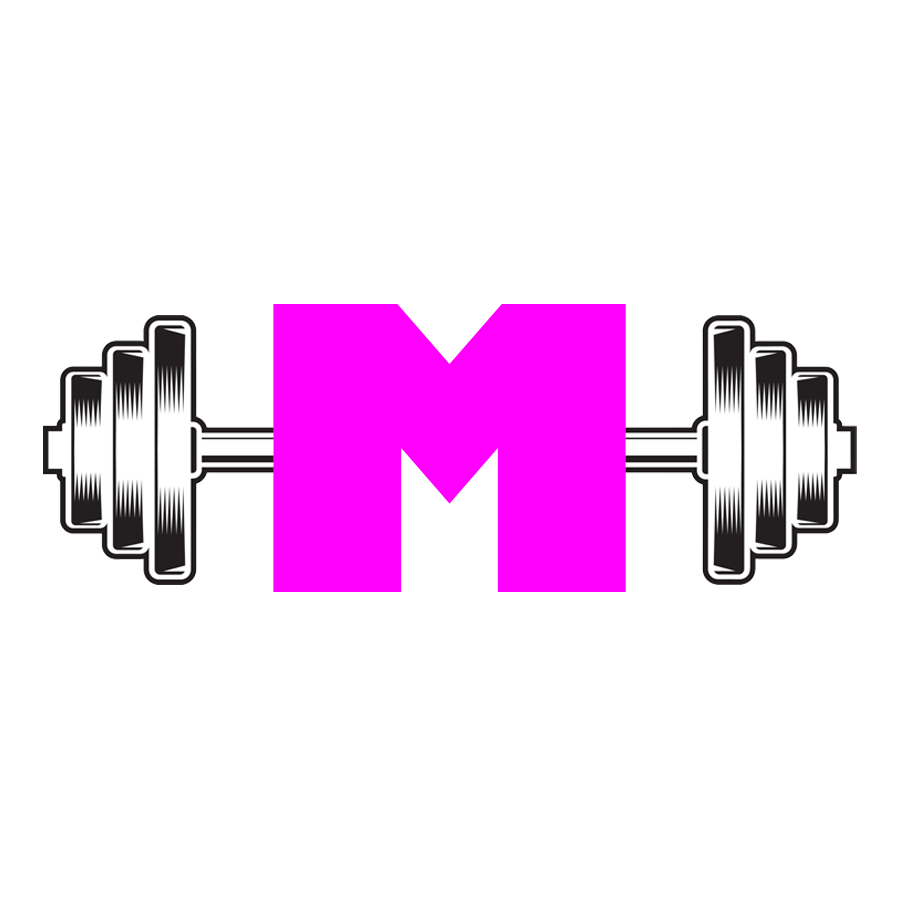
<style>
.page{position:relative;width:900px;height:900px;background:#ffffff}
.page>*{position:absolute;margin:0}
.t1{font:387.4px "GillSans-UltraBold";color:#ff00fc}
</style>
<div class="page">
<p class="t1" style="left:273px;top:304px;width:353px;height:288px">M</p>
</div>
